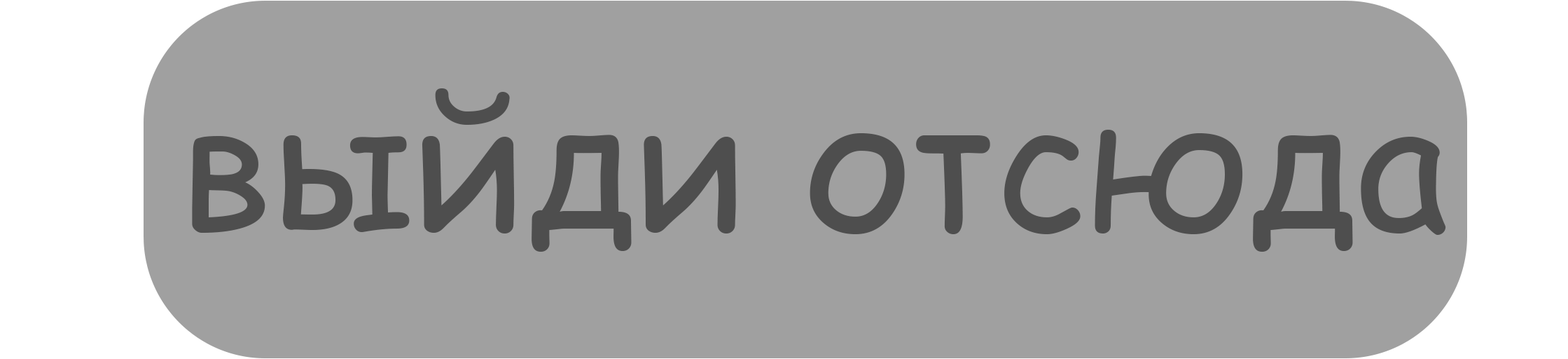
<style>
.page{position:relative;width:1568px;height:359px;background:#a0a0a0}
.page>*{position:absolute;margin:0}
.t1{font:180px "ComicSansMS";color:#4e4e4e}
</style>
<div class="page">
<p class="t1" style="left:192px;top:88px;width:1254px;height:163px">выйди отсюда</p>
</div>
